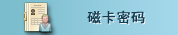
<style>
.page{position:relative;width:178px;height:35px}
.page>*{position:absolute;margin:0}
.t1{font:14px "SimHei";letter-spacing:0.015em;color:#133d53;font-weight:bold}
</style>
<div class="page">
<p class="t1" style="left:87px;top:10px;width:58px;height:14px">磁卡密码</p>
</div>
